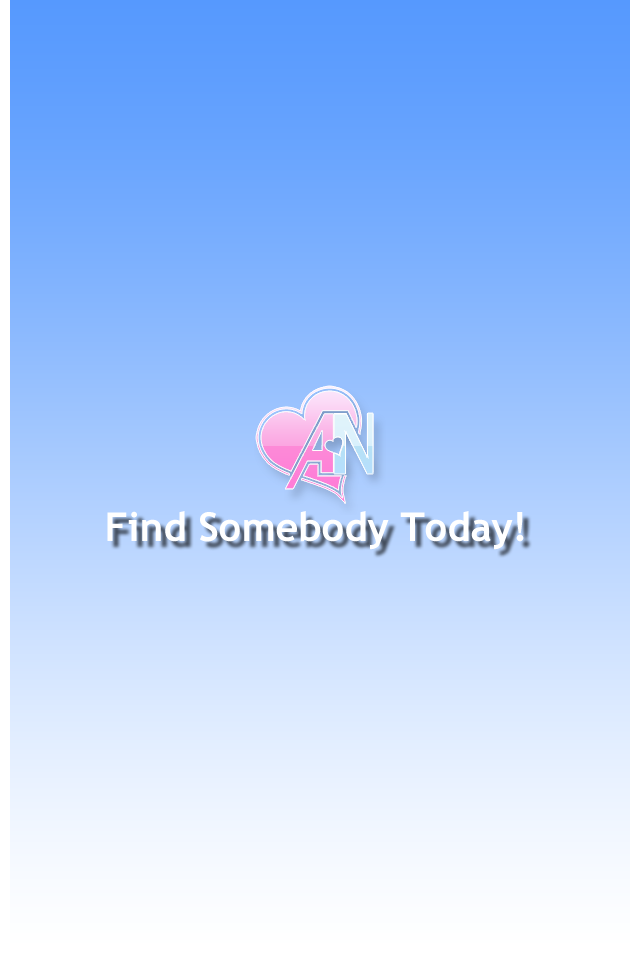
<style>
.page{position:relative;width:640px;height:960px}
.page>*{position:absolute;margin:0}
.t1{font:40px "TrebuchetMS-Bold";color:#ffffff}
</style>
<div class="page">
<p class="t1" style="left:107px;top:511px;width:417px;height:39px">Find Somebody Today!</p>
</div>
